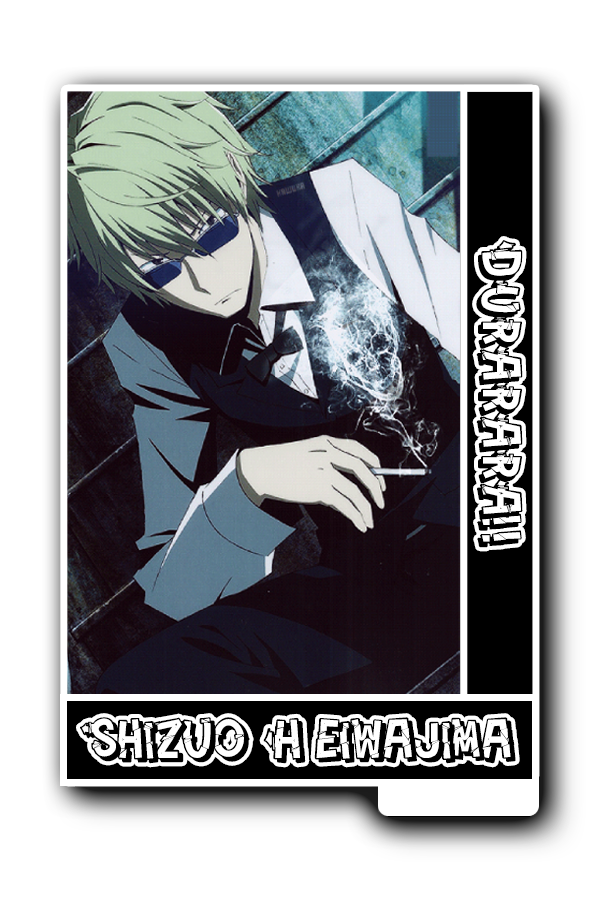
<style>
.page{position:relative;width:600px;height:900px;background:#ffffff}
.page>*{position:absolute;margin:0}
.t1{font:61px "PeintureFraiche";color:#000000}
</style>
<div class="page">
<p class="t1" style="left:476px;top:239px;width:47px;height:309px;rotate:90deg">DURARARA!!</p>
<p class="t1" style="left:80px;top:717px;width:436px;height:47px">Shizuo Heiwajima</p>
</div>
